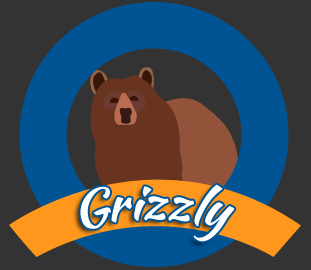
<style>
.page{position:relative;width:311px;height:270px;background:#333333}
.page>*{position:absolute;margin:0}
.t1{font:48px "KaushanScript-Regular";color:#ffffff}
</style>
<div class="page">
<p class="t1" style="left:80px;top:184px;width:155px;height:58px">Grizzly</p>
</div>
